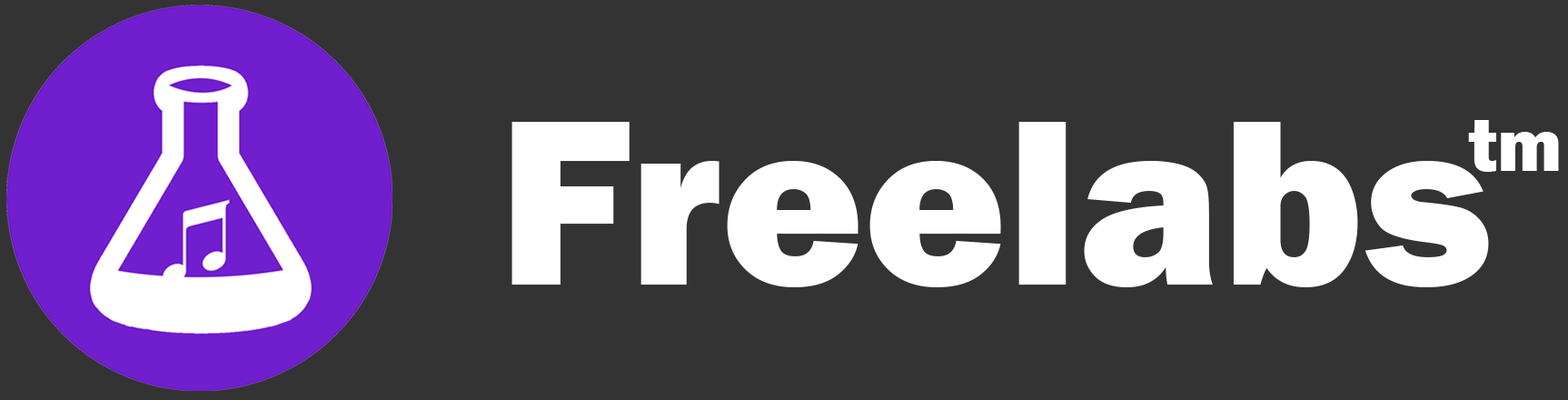
<style>
.page{position:relative;width:1568px;height:400px;background:#333333}
.page>*{position:absolute;margin:0}
.t1{font:243px "FranklinGothic-Heavy";color:#ffffff}
.t2{font:75.9px "FranklinGothic-Heavy";color:#ffffff}
</style>
<div class="page">
<p class="t1" style="left:511px;top:122px;width:978px;height:165px">Freelabs</p>
<p class="t2" style="left:1468px;top:120px;width:91px;height:52px">tm</p>
</div>
